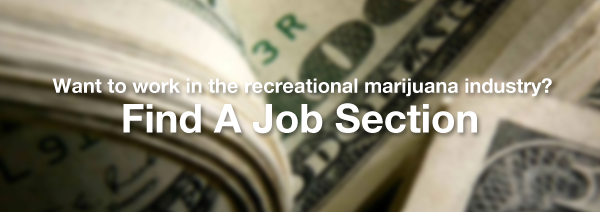
<style>
.page{position:relative;width:600px;height:212px}
.page>*{position:absolute;margin:0}
.t1{font:20px "HelveticaNeue-Bold";color:#ffffff}
.t2{font:40px "HelveticaNeue-Bold";color:#ffffff}
</style>
<div class="page">
<p class="t1" style="left:52px;top:78px;width:500px;height:19px">Want to work in the recreational marijuana industry?</p>
<p class="t2" style="left:123px;top:103px;width:354px;height:31px">Find A Job Section</p>
</div>
